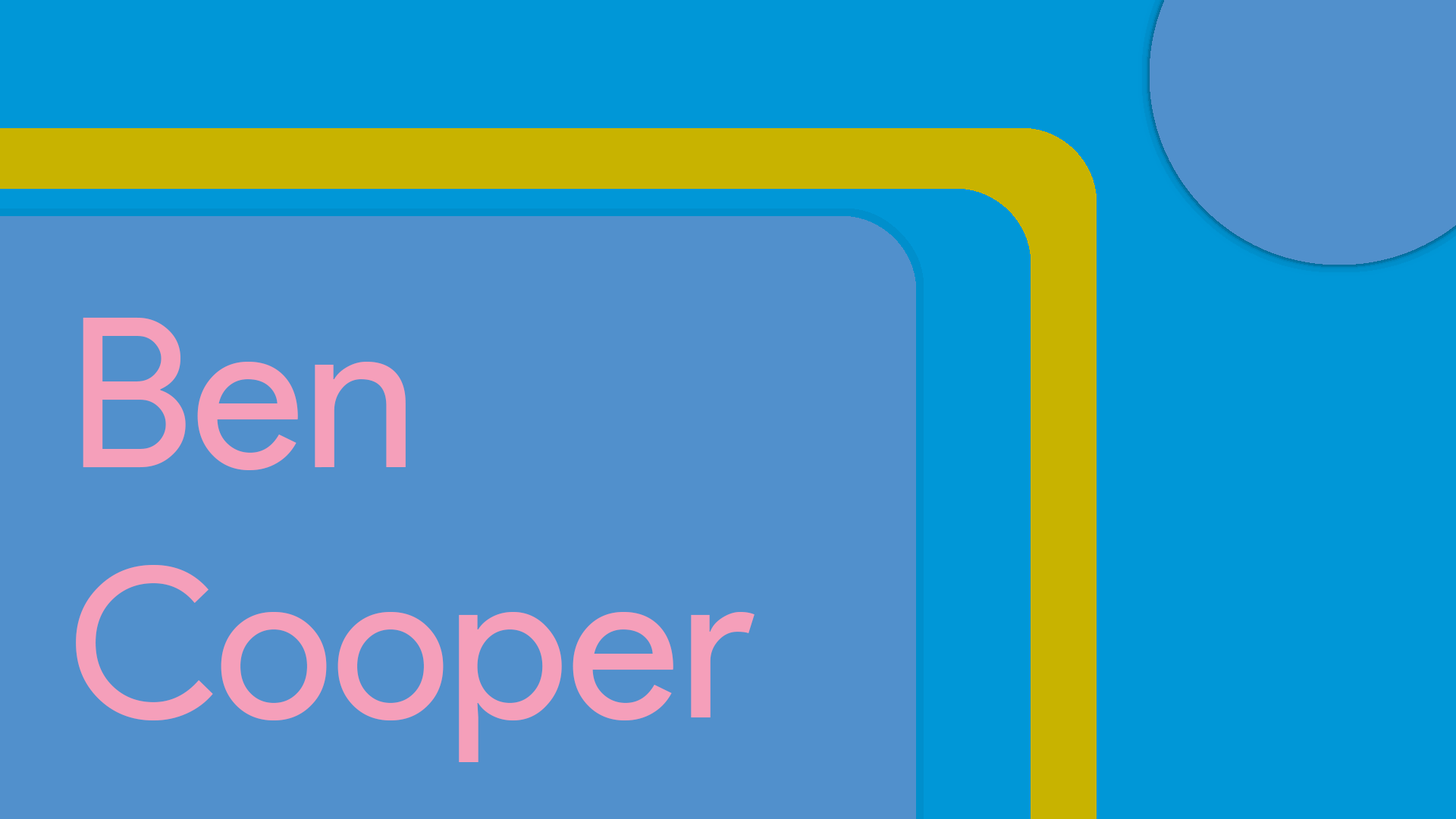
<style>
.page{position:relative;width:1456px;height:819px;background:#5190cc}
.page>*{position:absolute;margin:0}
.t1{font:208.5px "ProductSans-Regular";color:#f59fba}
</style>
<div class="page">
<p class="t1" style="left:76px;top:317px;width:679px;height:445px">Ben<br>Cooper</p>
</div>
